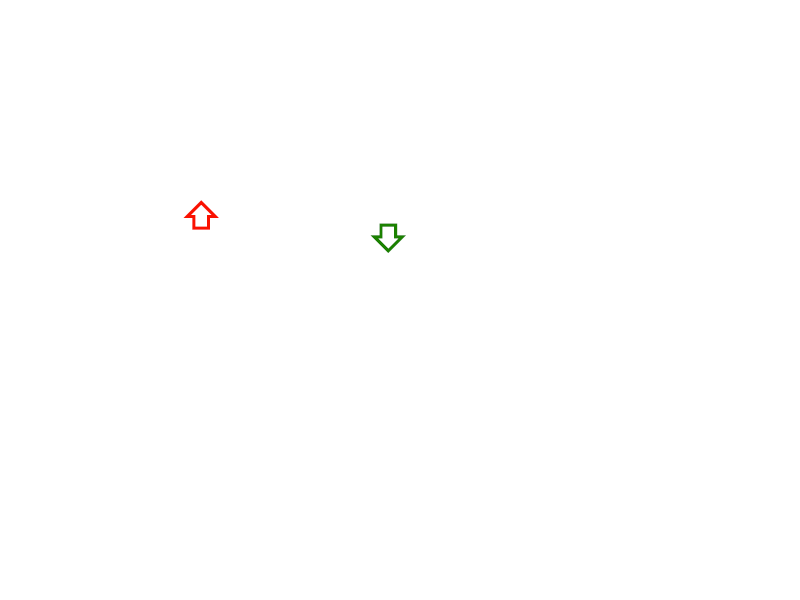
<style>
.page{position:relative;width:800px;height:600px;background:#ffffff}
.page>*{position:absolute;margin:0}
.t1{font:35px "CapitalsRegular";color:#fa1100}
.t2{font:35px "CapitalsRegular";color:#1b8100}
</style>
<div class="page">
<p class="t1" style="left:183px;top:200px;width:36px;height:30px">⇧</p>
<p class="t2" style="left:370px;top:223px;width:36px;height:30px;rotate:180deg">⇧</p>
</div>
